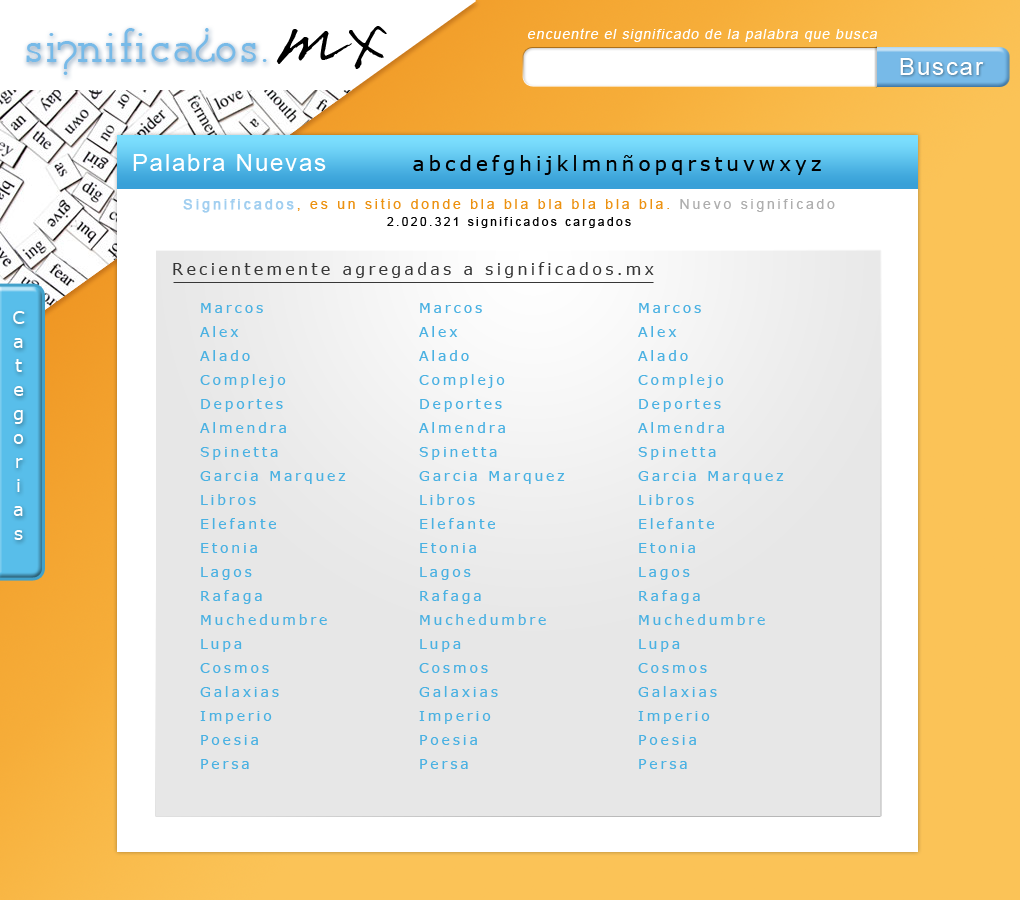
<style>
.page{position:relative;width:1020px;height:900px;background:#ffffff}
.page>*{position:absolute;margin:0}
.t1{font:14px "ArialMT";letter-spacing:0.075em;color:#ffffff;font-style:italic}
.t2{font:24px "ArialMT";letter-spacing:0.075em;color:#ffffff}
.t3{font:20px "Verdana";letter-spacing:0.2em;color:#000000}
.t4{font:14px "ArialMT";letter-spacing:0.2em;color:#ec9110}
.t5{font:14px "ArialMT";letter-spacing:0.2em;color:#a2cff0;font-weight:bold}
.t6{font:14px "ArialMT";letter-spacing:0.2em;color:#aeaeae}
.t7{font:12px "ArialMT";letter-spacing:0.2em;color:#010101}
.t8{font:16px "Verdana";letter-spacing:0.2em;color:#373737}
.t9{font:14px/24px "Verdana";letter-spacing:0.2em;color:#4ab1e2}
.t10{font:18px/24px "Verdana";letter-spacing:0.2em;color:#ffffff}
</style>
<div class="page">
<p class="t1" style="left:528px;top:28px;width:349px;height:14px">encuentre el significado de la palabra que busca</p>
<p class="t2" style="left:900px;top:58px;width:84px;height:17px">Buscar</p>
<p class="t2" style="left:133px;top:154px;width:193px;height:17px">Palabra Nuevas</p>
<p class="t3" style="left:413px;top:155px;width:408px;height:20px">abcdefghijklmnñopqrstuvwxyz</p>
<p class="t4" style="left:183px;top:198px;width:652px;height:15px"><span class="t5">Significados</span>, es un sitio donde bla bla bla bla bla bla. <span class="t6">Nuevo significado</span></p>
<p class="t7" style="left:387px;top:217px;width:244px;height:11px">2.020.321 significados cargados</p>
<p class="t8" style="left:173px;top:262px;width:481px;height:16px">Recientemente agregadas a significados.mx</p>
<p class="t9" style="left:200px;top:303px;width:146px;height:466px">Marcos<br>Alex<br>Alado<br>Complejo<br>Deportes<br>Almendra<br>Spinetta<br>Garcia Marquez<br>Libros<br>Elefante<br>Etonia<br>Lagos<br>Rafaga<br>Muchedumbre<br>Lupa<br>Cosmos<br>Galaxias<br>Imperio<br>Poesia<br>Persa</p>
<p class="t9" style="left:419px;top:303px;width:146px;height:466px">Marcos<br>Alex<br>Alado<br>Complejo<br>Deportes<br>Almendra<br>Spinetta<br>Garcia Marquez<br>Libros<br>Elefante<br>Etonia<br>Lagos<br>Rafaga<br>Muchedumbre<br>Lupa<br>Cosmos<br>Galaxias<br>Imperio<br>Poesia<br>Persa</p>
<p class="t9" style="left:638px;top:303px;width:146px;height:466px">Marcos<br>Alex<br>Alado<br>Complejo<br>Deportes<br>Almendra<br>Spinetta<br>Garcia Marquez<br>Libros<br>Elefante<br>Etonia<br>Lagos<br>Rafaga<br>Muchedumbre<br>Lupa<br>Cosmos<br>Galaxias<br>Imperio<br>Poesia<br>Persa</p>
<p class="t10" style="left:13px;top:311px;width:12px;height:229px;text-align:center">C<br>a<br>t<br>e<br>g<br>o<br>r<br>i<br>a<br>s</p>
</div>
